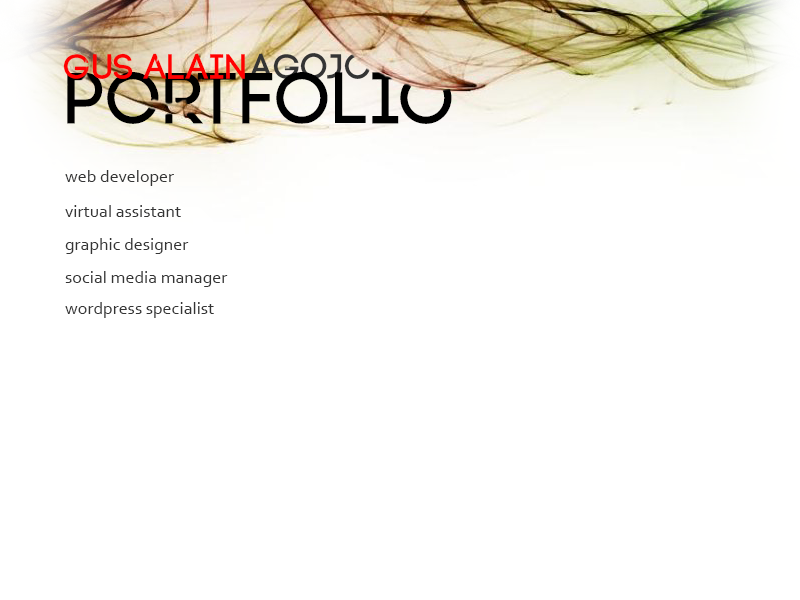
<style>
.page{position:relative;width:800px;height:600px;background:#ffffff}
.page>*{position:absolute;margin:0}
.t1{font:36px "Code-Pro-Demo";color:#ff0000}
.t2{font:36px "Code-Pro-Demo";color:#343434}
.t3{font:72px "Code-Pro-Demo";color:#000000}
.t4{font:18px "Corbel";color:#343434}
</style>
<div class="page">
<p class="t1" style="left:63px;top:53px;width:182px;height:26px">Gus Alain</p>
<p class="t2" style="left:249px;top:53px;width:122px;height:26px">Agojo</p>
<p class="t3" style="left:67px;top:72px;width:385px;height:52px">Portfolio</p>
<p class="t4" style="left:65px;top:170px;width:109px;height:16px">web developer</p>
<p class="t4" style="left:65px;top:205px;width:116px;height:12px">virtual assistant</p>
<p class="t4" style="left:65px;top:238px;width:124px;height:16px">graphic designer</p>
<p class="t4" style="left:65px;top:271px;width:163px;height:16px">social media manager</p>
<p class="t4" style="left:65px;top:302px;width:149px;height:16px">wordpress specialist</p>
</div>
